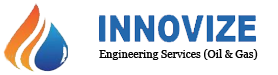
<style>
.page{position:relative;width:278px;height:75px;background:#ffffff}
.page>*{position:absolute;margin:0}
.t1{font:11px "Georgia";color:#040404}
</style>
<div class="page">
<p class="t1" style="left:99px;top:49px;width:159px;height:11px">Engineering Services (Oil &amp; Gas)</p>
</div>
